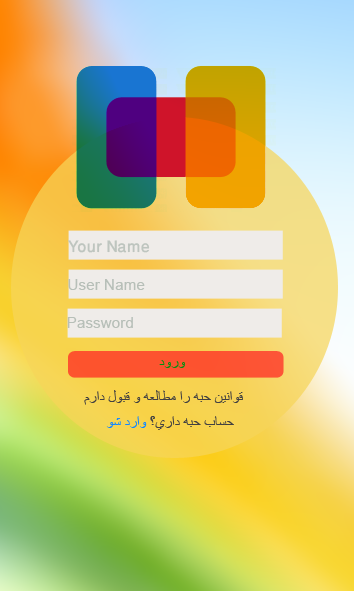
<style>
.page{position:relative;width:354px;height:591px}
.page>*{position:absolute;margin:0}
.t1{font:22.5px "WinSoftPro-Medium";color:#bec5bf}
.t2{font:15.3px "ArialMT";color:#b7bfb8}
.t3{font:15.3px "ArialMT";color:#049011}
.t4{font:14.6px "ArialMT";color:#434141}
.t5{font:14.6px "ArialMT";color:#1388ff}
</style>
<div class="page">
<p class="t1" style="left:68px;top:240px;width:82px;height:13px">Your Name</p>
<p class="t2" style="left:68px;top:279px;width:77px;height:11px">User Name</p>
<p class="t2" style="left:67px;top:317px;width:66px;height:11px">Password</p>
<p class="t3" style="left:159px;top:360px;width:26px;height:8px">ورود</p>
<p class="t4" style="left:84px;top:390px;width:159px;height:15px">قوانين حبه را مطالعه و قبول دارم</p>
<p class="t4" style="left:106px;top:416px;width:128px;height:14px">حساب حبه داري؟ <span class="t5">وارد شو</span></p>
</div>
